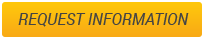
<style>
.page{position:relative;width:205px;height:38px}
.page>*{position:absolute;margin:0}
.t1{font:16px "Roboto-Italic";color:#444444;text-transform:uppercase}
</style>
<div class="page">
<p class="t1" style="left:18px;top:13px;width:171px;height:14px">Request Information</p>
</div>
